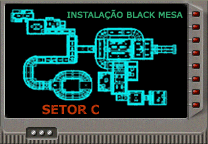
<style>
.page{position:relative;width:208px;height:144px;background:#000000}
.page>*{position:absolute;margin:0}
.t1{font:8px "Verdana";color:#31a56b;font-weight:bold;scale:1.04 1}
.t2{font:12.5px "Verdana-Bold";color:#c63908;scale:0.96 1}
</style>
<div class="page">
<p class="t1" style="left:67px;top:9px;width:116px;height:11px">INSTALAÇÃO BLACK MESA</p>
<p class="t2" style="left:42px;top:104px;width:57px;height:11px">SETOR C</p>
</div>
